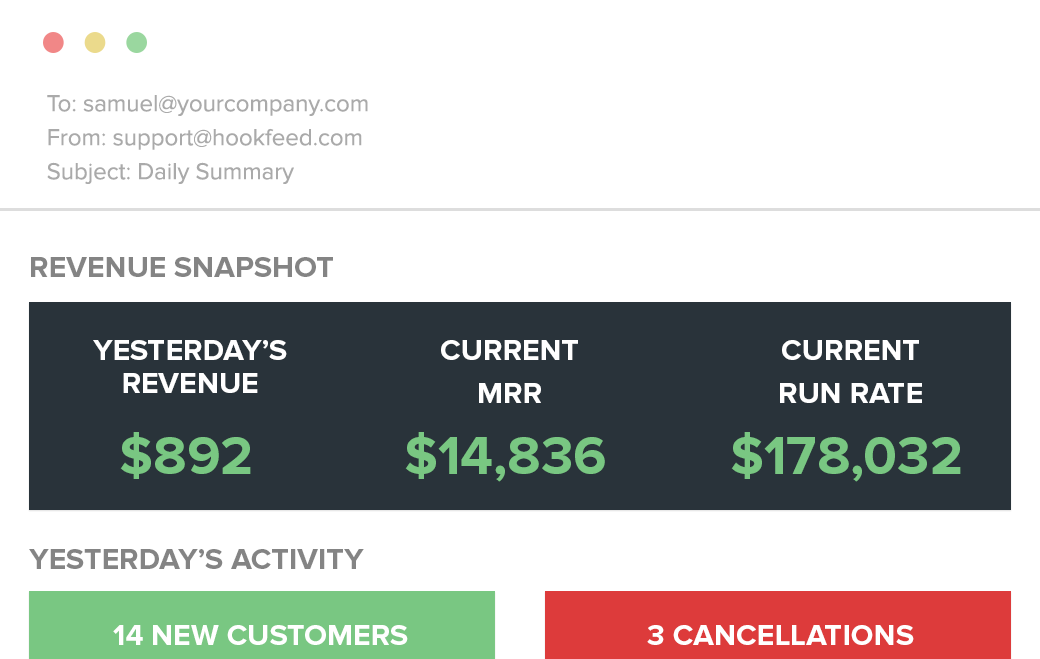
<style>
.page{position:relative;width:1040px;height:659px;background:#ffffff}
.page>*{position:absolute;margin:0}
.t1{font:24px/34px "ProximaNova-Regular";color:#aaaaaa}
.t2{font:30px "ProximaNova-Bold";color:#848484}
.t3{font:30px/33px "ProximaNova-Bold";color:#ffffff}
.t4{font:30px/43px "ProximaNova-Bold";color:#ffffff}
.t5{font:55.3px "ProximaNova-Bold";color:#79c782}
.t6{font:30px "ProximaNova-Bold";color:#ffffff}
</style>
<div class="page">
<p class="t1" style="left:47px;top:95px;width:321px;height:89px">To: samuel@yourcompany.com<br>From: support@hookfeed.com<br>Subject: Daily Summary</p>
<p class="t2" style="left:31px;top:257px;width:302px;height:20px">REVENUE SNAPSHOT</p>
<p class="t3" style="left:93px;top:340px;width:194px;height:53px;text-align:center">YESTERDAY’S <br>REVENUE</p>
<p class="t4" style="left:441px;top:340px;width:137px;height:63px;text-align:center">CURRENT <br>MRR</p>
<p class="t4" style="left:780px;top:340px;width:142px;height:63px;text-align:center">CURRENT <br>RUN RATE</p>
<p class="t5" style="left:120px;top:432px;width:131px;height:47px">$892</p>
<p class="t5" style="left:405px;top:432px;width:200px;height:50px">$14,836</p>
<p class="t5" style="left:731px;top:432px;width:230px;height:50px">$178,032</p>
<p class="t2" style="left:29px;top:549px;width:335px;height:20px">YESTERDAY’S ACTIVITY</p>
<p class="t6" style="left:113px;top:625px;width:295px;height:20px">14 NEW CUSTOMERS</p>
<p class="t6" style="left:647px;top:625px;width:267px;height:20px">3 CANCELLATIONS</p>
</div>
